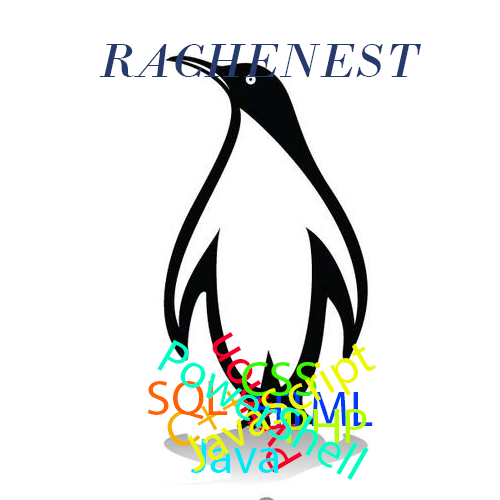
<style>
.page{position:relative;width:500px;height:500px;background:#ffffff}
.page>*{position:absolute;margin:0}
.t1{font:50px "BodoniMT-Italic";color:#263b6c}
.t2{font:50px "MyriadPro-Regular";color:#00ffc8}
.t3{font:50px "MyriadPro-Regular";color:#f60029}
.t4{font:50px "MyriadPro-Regular";color:#eef600}
.t5{font:50px "MyriadPro-Regular";color:#3ef600}
.t6{font:50px "MyriadPro-Regular";color:#ff6200}
.t7{font:50px "MyriadPro-Regular";color:#f6b100}
.t8{font:50px "MyriadPro-Regular"}
.t9{font:50px "MyriadPro-Regular";color:#b3ff00}
.t10{font:50px "MyriadPro-Regular";color:#00eaf6}
</style>
<div class="page">
<p class="t1" style="left:99px;top:44px;width:322px;height:33px">RACHENEST</p>
<p class="t2" style="left:157px;top:340px;width:212px;height:140px;rotate:30deg">PowerShell</p>
<p class="t3" style="left:212px;top:332px;width:90px;height:141px;rotate:-120deg">Python</p>
<p class="t4" style="left:187px;top:343px;width:189px;height:129px;rotate:-30deg">JavaScript</p>
<p class="t5" style="left:242px;top:362px;width:75px;height:34px">CSS</p>
<p class="t6" style="left:147px;top:381px;width:81px;height:39px">SQL</p>
<p class="t7" style="left:167px;top:390px;width:80px;height:56px;rotate:-30deg">C++</p>
<p class="t8" style="left:255px;top:392px;width:118px;height:34px">HTML</p>
<p class="t9" style="left:286px;top:409px;width:81px;height:34px">PHP</p>
<p class="t10" style="left:191px;top:439px;width:88px;height:34px">Java</p>
</div>
